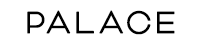
<style>
.page{position:relative;width:200px;height:45px;background:#ffffff}
.page>*{position:absolute;margin:0}
.t1{font:30px "Vonique43";letter-spacing:0.125em;color:#000000;font-weight:bold}
</style>
<div class="page">
<p class="t1" style="left:27px;top:10px;width:148px;height:25px">PALACE</p>
</div>
